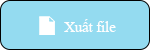
<style>
.page{position:relative;width:150px;height:50px;background:#94dbf0}
.page>*{position:absolute;margin:0}
.t1{font:15.3px "TimesNewRomanPSMT";color:#fefefe;scale:0.95 1}
</style>
<div class="page">
<p class="t1" style="left:64px;top:19px;width:52px;height:13px">Xuất file</p>
</div>
